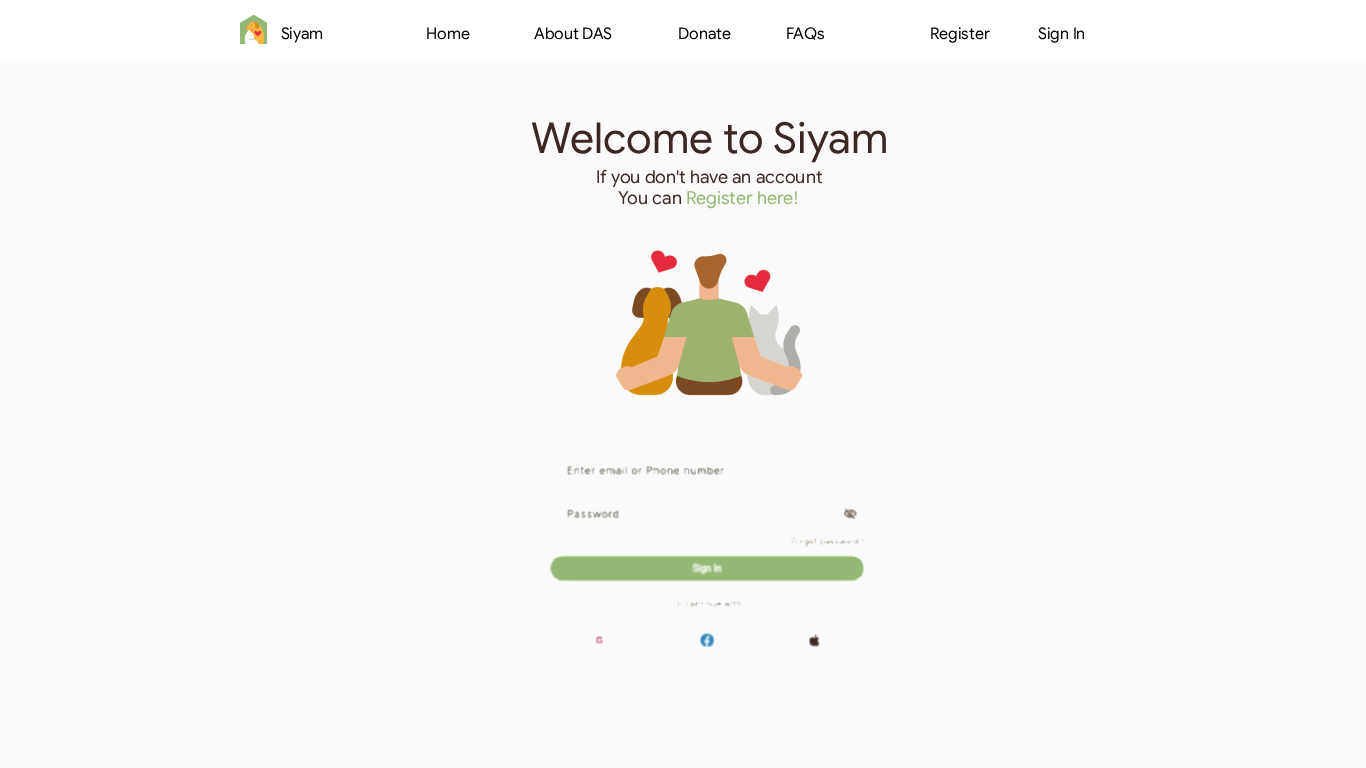
<style>
.page{position:relative;width:1366px;height:768px;background:#fafafa}
.page>*{position:absolute;margin:0}
.t1{font:16px "GoogleSansFlex-Regular";color:#000000}
.t2{font:42.8px "GoogleSansFlex-Regular";color:#3c2723}
.t3{font:18px "GoogleSansFlex-Regular";color:#3c2723}
.t4{font:18px "GoogleSansFlex-Regular";color:#93b873}
</style>
<div class="page">
<p class="t1" style="left:281px;top:27px;width:804px;height:16px">Siyam   Home  About DAS  Donate  FAQs   Register  Sign In</p>
<p class="t1" style="left:281px;top:27px;width:804px;height:16px">Siyam   Home  About DAS  Donate  FAQs   Register  Sign In</p>
<p class="t2" style="left:531px;top:121px;width:355px;height:42px">Welcome to Siyam</p>
<p class="t3" style="left:597px;top:169px;width:225px;height:40px;text-align:center">If you don't have an account<br>You can <span class="t4">Register here!</span></p>
</div>
